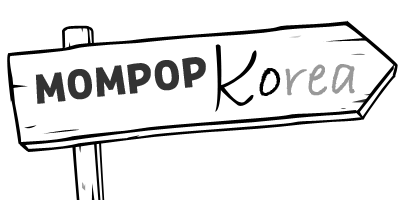
<style>
.page{position:relative;width:400px;height:200px;background:#ffffff}
.page>*{position:absolute;margin:0}
.t1{font:35.6px "KoreanHYGR-R";letter-spacing:0.05em;color:#333333}
.t2{font:59.3px "BradleyHandITC";color:#999999;font-weight:bold}
.t3{font:59.3px "BradleyHandITC";color:#000000;font-weight:bold}
</style>
<div class="page">
<p class="t1" style="left:35px;top:57px;width:171px;height:47px;rotate:-6deg">MOMPOP</p>
<p class="t2" style="left:259px;top:64px;width:96px;height:32px;rotate:-1deg"><span class="t3">o</span>rea</p>
</div>
